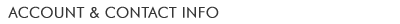
<style>
.page{position:relative;width:400px;height:24px;background:#ffffff}
.page>*{position:absolute;margin:0}
.t1{font:14.7px "FuturaBT-Light";letter-spacing:0.025em;color:#363636;text-transform:uppercase;font-weight:bold}
</style>
<div class="page">
<p class="t1" style="left:8px;top:6px;width:211px;height:12px">ACCOUNT &amp; CONTACT INFO</p>
</div>
